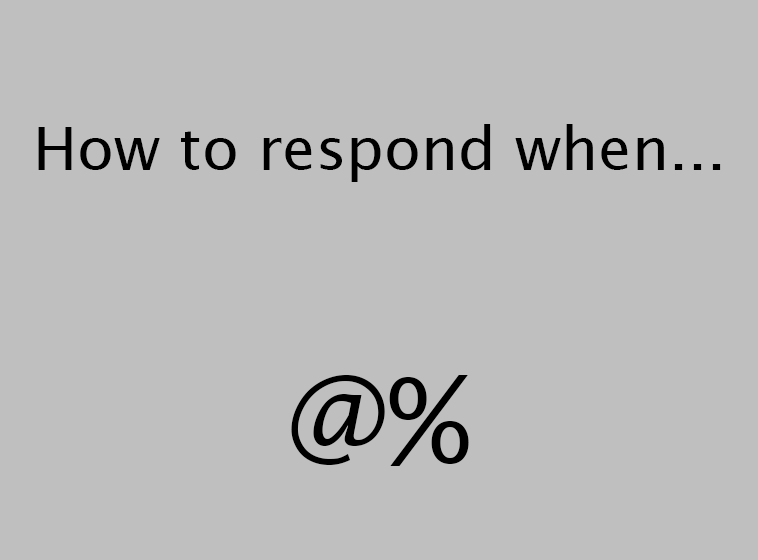
<style>
.page{position:relative;width:758px;height:560px;background:#bfbfbf}
.page>*{position:absolute;margin:0}
.t1{font:60px "LucidaSans";color:#000000}
.t2{font:120px "LucidaSans";color:#000000}
</style>
<div class="page">
<p class="t1" style="left:38px;top:124px;width:683px;height:58px">How to respond when...</p>
<p class="t2" style="left:291px;top:375px;width:178px;height:91px">@%</p>
</div>
